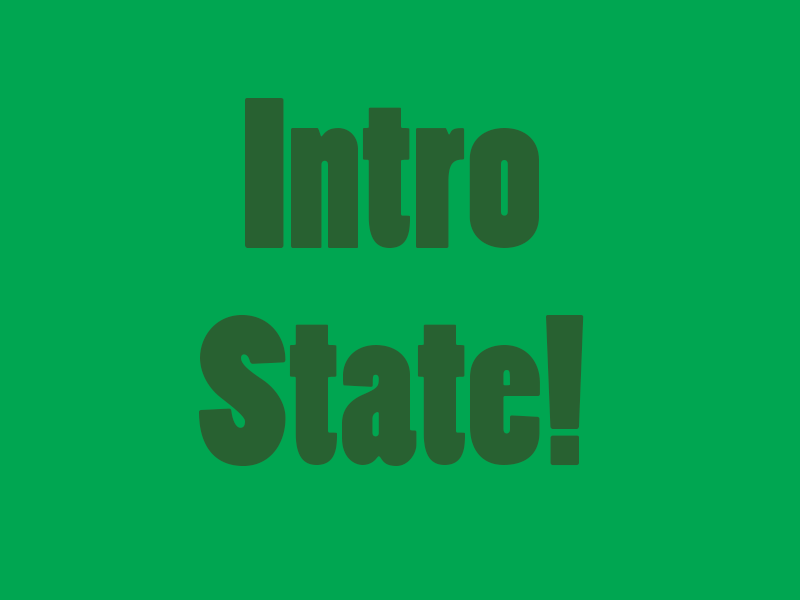
<style>
.page{position:relative;width:800px;height:600px;background:#00a651}
.page>*{position:absolute;margin:0}
.t1{font:200px/216.7px "PoplarStd";color:#286131}
</style>
<div class="page">
<p class="t1" style="left:199px;top:98px;width:385px;height:368px;text-align:center">Intro<br>State!</p>
</div>
